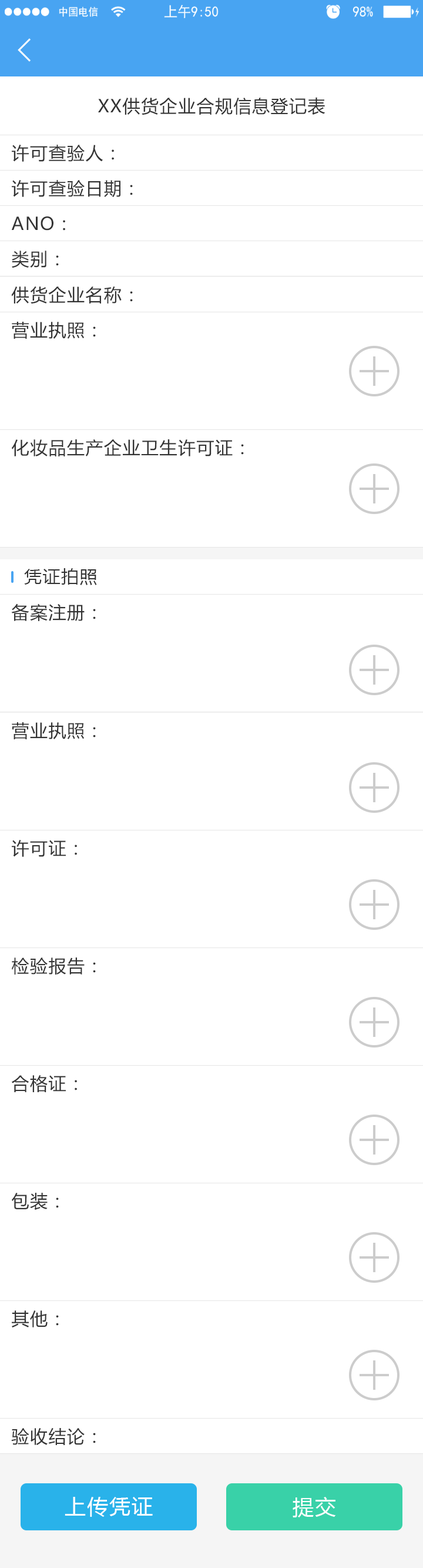
<style>
.page{position:relative;width:423px;height:1568px;background:#ffffff}
.page>*{position:absolute;margin:0}
.t1{font:17.6px "MicrosoftYaHei";letter-spacing:0.05em;color:#333333}
.t2{font:21.2px "MicrosoftYaHei";letter-spacing:0.05em;color:#ffffff}
</style>
<div class="page">
<p class="t1" style="left:98px;top:97px;width:227px;height:18px">XX供货企业合规信息登记表</p>
<p class="t1" style="left:12px;top:145px;width:102px;height:17px">许可查验人：</p>
<p class="t1" style="left:12px;top:180px;width:121px;height:18px">许可查验日期：</p>
<p class="t1" style="left:12px;top:216px;width:53px;height:15px">ANO：</p>
<p class="t1" style="left:12px;top:251px;width:47px;height:17px">类别：</p>
<p class="t1" style="left:11px;top:286px;width:122px;height:18px">供货企业名称：</p>
<p class="t1" style="left:12px;top:322px;width:84px;height:17px">营业执照：</p>
<p class="t1" style="left:12px;top:439px;width:232px;height:17px">化妆品生产企业卫生许可证：</p>
<p class="t1" style="left:24px;top:568px;width:73px;height:17px">凭证拍照</p>
<p class="t1" style="left:11px;top:603px;width:85px;height:18px">备案注册：</p>
<p class="t1" style="left:12px;top:722px;width:84px;height:17px">营业执照：</p>
<p class="t1" style="left:12px;top:840px;width:65px;height:17px">许可证：</p>
<p class="t1" style="left:12px;top:958px;width:84px;height:17px">检验报告：</p>
<p class="t1" style="left:12px;top:1075px;width:65px;height:17px">合格证：</p>
<p class="t1" style="left:11px;top:1193px;width:48px;height:17px">包装：</p>
<p class="t1" style="left:12px;top:1310px;width:47px;height:17px">其他：</p>
<p class="t1" style="left:11px;top:1427px;width:85px;height:18px">验收结论：</p>
<p class="t2" style="left:65px;top:1497px;width:88px;height:20px">上传凭证</p>
<p class="t2" style="left:293px;top:1497px;width:43px;height:20px">提交</p>
</div>
